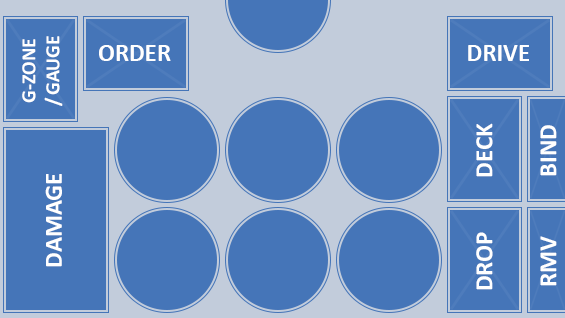
<style>
.page{position:relative;width:565px;height:318px;background:#4575b8}
.page>*{position:absolute;margin:0}
.t1{font:20px "Calibri-Bold";color:#ffffff}
.t2{font:25px "Calibri-Bold";color:#ffffff}
</style>
<div class="page">
<p class="t1" style="left:22px;top:36px;width:41px;height:70px;text-align:center;rotate:-90deg">G-ZONE<br>/ GAUGE</p>
<p class="t2" style="left:99px;top:45px;width:72px;height:16px">ORDER</p>
<p class="t2" style="left:468px;top:45px;width:61px;height:16px">DRIVE</p>
<p class="t2" style="left:476px;top:123px;width:17px;height:54px;rotate:-90deg">DECK</p>
<p class="t2" style="left:540px;top:125px;width:17px;height:51px;rotate:-90deg">BIND</p>
<p class="t2" style="left:45px;top:174px;width:17px;height:93px;rotate:-90deg">DAMAGE</p>
<p class="t2" style="left:476px;top:232px;width:17px;height:58px;rotate:-90deg">DROP</p>
<p class="t2" style="left:540px;top:236px;width:17px;height:50px;rotate:-90deg">RMV</p>
</div>
